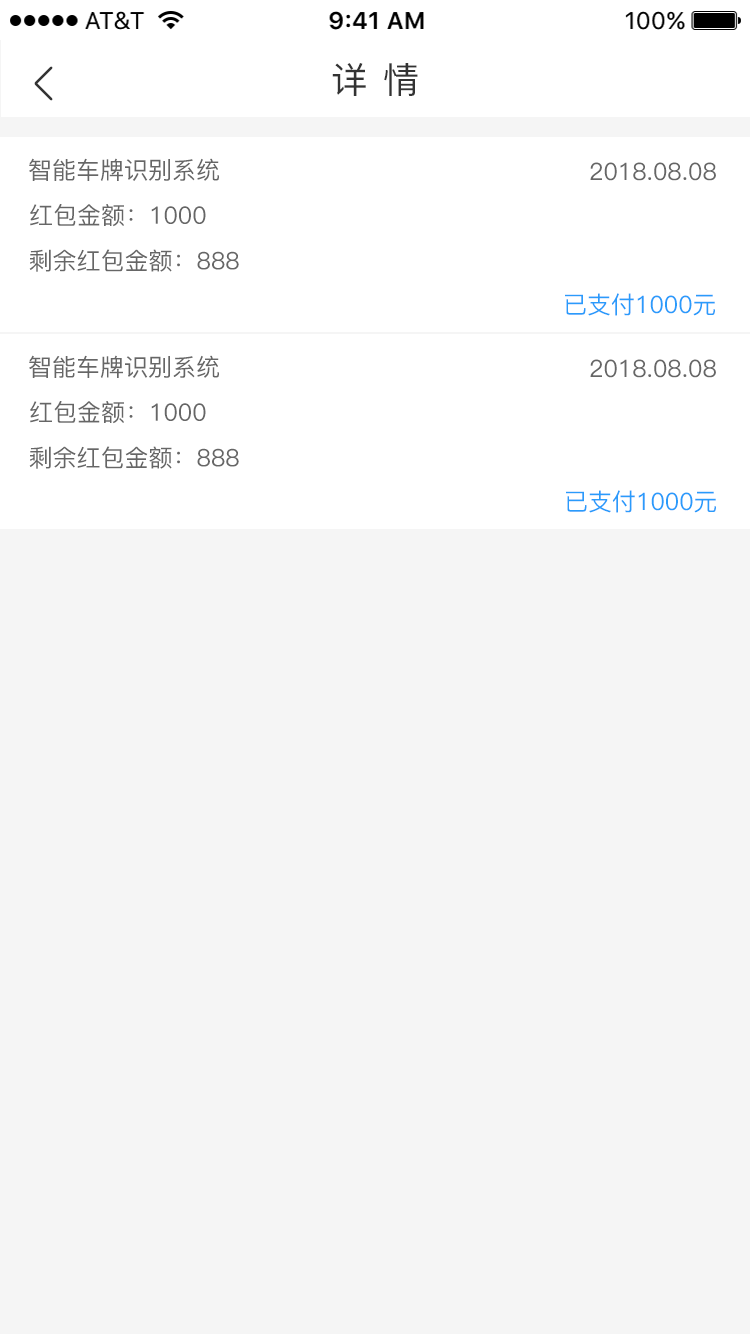
<style>
.page{position:relative;width:750px;height:1334px;background:#f5f5f5}
.page>*{position:absolute;margin:0}
.t1{font:36px "PingFang-SC-Medium";letter-spacing:0.05em;color:#333333;text-transform:uppercase}
.t2{font:24px "PingFang-SC-Medium";color:#666666}
.t3{font:24px "PingFang-SC-Medium";color:#2a9bfb}
</style>
<div class="page">
<p class="t1" style="left:332px;top:63px;width:86px;height:33px">详 情</p>
<p class="t2" style="left:29px;top:158px;width:190px;height:23px">智能车牌识别系统</p>
<p class="t2" style="left:590px;top:162px;width:126px;height:19px">2018.08.08</p>
<p class="t2" style="left:30px;top:204px;width:176px;height:23px">红包金额：1000</p>
<p class="t2" style="left:29px;top:249px;width:210px;height:23px">剩余红包金额：888</p>
<p class="t3" style="left:565px;top:293px;width:150px;height:23px">已支付1000元</p>
<p class="t2" style="left:29px;top:355px;width:190px;height:23px">智能车牌识别系统</p>
<p class="t2" style="left:590px;top:359px;width:126px;height:19px">2018.08.08</p>
<p class="t2" style="left:30px;top:401px;width:176px;height:23px">红包金额：1000</p>
<p class="t2" style="left:29px;top:446px;width:210px;height:23px">剩余红包金额：888</p>
<p class="t3" style="left:566px;top:490px;width:150px;height:23px">已支付1000元</p>
</div>
